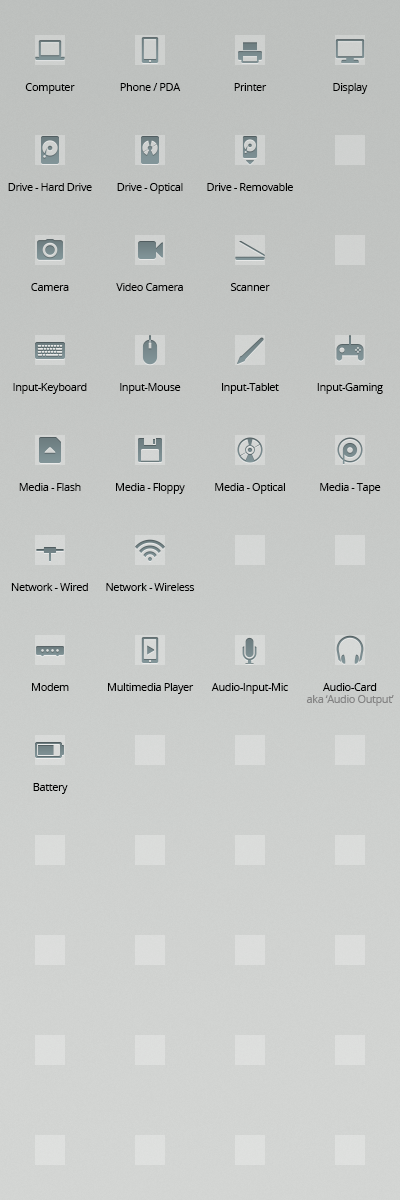
<style>
.page{position:relative;width:400px;height:1200px}
.page>*{position:absolute;margin:0}
.t1{font:11.3px "OpenSans";letter-spacing:-0.05em;color:#000000}
.t2{font:11.3px/11.3px "OpenSans";letter-spacing:-0.05em;color:#838383}
.t3{font:11.3px/99.6px "OpenSans";letter-spacing:-0.05em;color:#000000}
</style>
<div class="page">
<p class="t1" style="left:25px;top:83px;width:50px;height:11px">Computer</p>
<p class="t1" style="left:120px;top:83px;width:61px;height:8px">Phone / PDA</p>
<p class="t1" style="left:234px;top:83px;width:33px;height:8px">Printer</p>
<p class="t1" style="left:333px;top:83px;width:35px;height:11px">Display</p>
<p class="t1" style="left:8px;top:183px;width:84px;height:8px">Drive - Hard Drive</p>
<p class="t1" style="left:117px;top:183px;width:66px;height:11px">Drive - Optical</p>
<p class="t1" style="left:207px;top:183px;width:86px;height:8px">Drive - Removable</p>
<p class="t1" style="left:31px;top:283px;width:38px;height:8px">Camera</p>
<p class="t1" style="left:116px;top:283px;width:67px;height:8px">Video Camera</p>
<p class="t1" style="left:230px;top:283px;width:40px;height:8px">Scanner</p>
<p class="t1" style="left:13px;top:383px;width:74px;height:11px">Input-Keyboard</p>
<p class="t1" style="left:120px;top:383px;width:61px;height:11px">Input-Mouse</p>
<p class="t1" style="left:222px;top:383px;width:57px;height:11px">Input-Tablet</p>
<p class="t1" style="left:317px;top:383px;width:66px;height:11px">Input-Gaming</p>
<p class="t1" style="left:19px;top:483px;width:62px;height:8px">Media - Flash</p>
<p class="t1" style="left:116px;top:483px;width:69px;height:11px">Media - Floppy</p>
<p class="t1" style="left:215px;top:483px;width:70px;height:11px">Media - Optical</p>
<p class="t1" style="left:320px;top:483px;width:61px;height:11px">Media - Tape</p>
<p class="t1" style="left:11px;top:583px;width:77px;height:8px">Network - Wired</p>
<p class="t1" style="left:106px;top:583px;width:89px;height:8px">Network - Wireless</p>
<p class="t1" style="left:32px;top:683px;width:37px;height:8px">Modem</p>
<p class="t1" style="left:108px;top:683px;width:86px;height:11px">Multimedia Player</p>
<p class="t1" style="left:211px;top:683px;width:77px;height:11px">Audio-Input-Mic</p>
<p class="t2" style="left:306px;top:683px;width:88px;height:23px;text-align:center"><span class="t3">Audio-Card<br></span>aka ‘Audio Output’</p>
<p class="t1" style="left:33px;top:783px;width:35px;height:11px">Battery</p>
</div>
